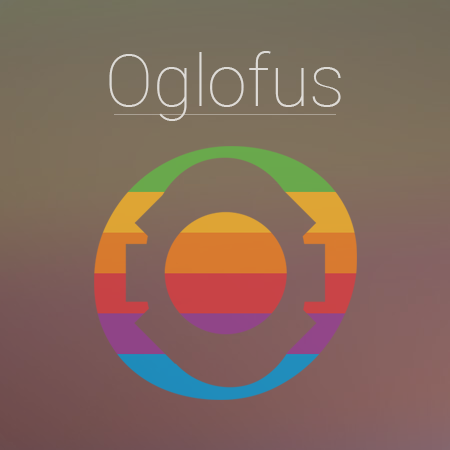
<style>
.page{position:relative;width:450px;height:450px}
.page>*{position:absolute;margin:0}
.t1{font:72px "Roboto-Thin";color:#dedbd6}
</style>
<div class="page">
<p class="t1" style="left:109px;top:51px;width:232px;height:70px">Oglofus</p>
</div>
